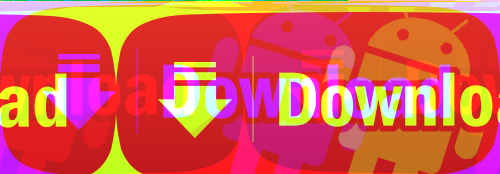
<style>
.page{position:relative;width:500px;height:174px}
.page>*{position:absolute;margin:0}
.t1{font:79.4px "FranklinGothic-DemiCond"}
</style>
<div class="page">
<p class="t1" style="left:163px;top:60px;width:288px;height:55px">Download</p>
</div>
